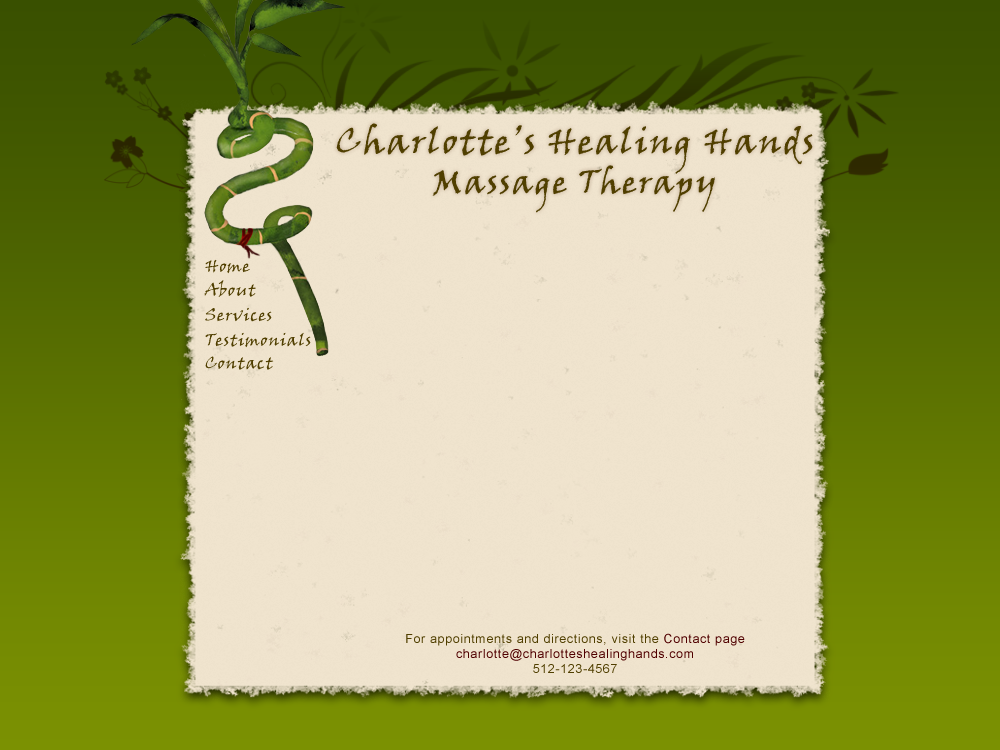
<style>
.page{position:relative;width:1000px;height:750px}
.page>*{position:absolute;margin:0}
.t1{font:35.4px "VinerHandITC";letter-spacing:0.05em;color:#503f00}
.t2{font:33.3px "VinerHandITC";letter-spacing:0.05em;color:#503f00}
.t3{font:16.7px "VinerHandITC";letter-spacing:0.05em;color:#503f00}
.t4{font:12.5px "ArialMT";letter-spacing:0.05em;color:#500000}
.t5{font:12.5px "ArialMT";letter-spacing:0.05em;color:#503f00}
</style>
<div class="page">
<p class="t1" style="left:336px;top:123px;width:477px;height:90px;text-align:center">Charlotte’s Healing Hands<br><span class="t2">Massage Therapy</span></p>
<p class="t3" style="left:205px;top:259px;width:45px;height:15px">Home</p>
<p class="t3" style="left:204px;top:280px;width:52px;height:17px">About</p>
<p class="t3" style="left:205px;top:307px;width:67px;height:15px">Services</p>
<p class="t3" style="left:205px;top:332px;width:106px;height:16px">Testimonials</p>
<p class="t3" style="left:205px;top:356px;width:69px;height:14px">Contact</p>
<p class="t4" style="left:406px;top:633px;width:339px;height:40px;text-align:center"><span class="t5">For appointments and directions, visit the </span>Contact page<br>charlotte@charlotteshealinghands.com<br><span class="t5">512-123-4567</span></p>
</div>
